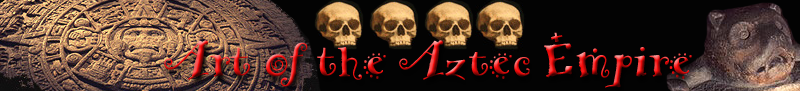
<style>
.page{position:relative;width:800px;height:91px;background:#030303}
.page>*{position:absolute;margin:0}
.t1{font:48px "HERMAN"}
</style>
<div class="page">
<p class="t1" style="left:164px;top:32px;width:528px;height:56px">Art of the Aztec Empire</p>
</div>
